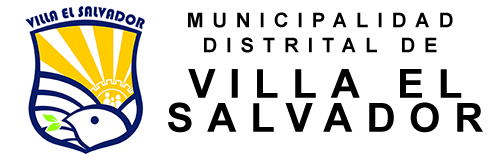
<style>
.page{position:relative;width:500px;height:160px;background:#ffffff}
.page>*{position:absolute;margin:0}
.t1{font:20px/25px "Arial-BoldMT";letter-spacing:0.44em;color:#000000}
.t2{font:40px "Arial-BoldMT";letter-spacing:0.34em;color:#000000}
</style>
<div class="page">
<p class="t1" style="left:188px;top:12px;width:265px;height:41px;text-align:center">MUNICIPALIDAD DISTRITAL DE</p>
<p class="t2" style="left:168px;top:69px;width:315px;height:64px">VILLA EL SALVADOR</p>
</div>
